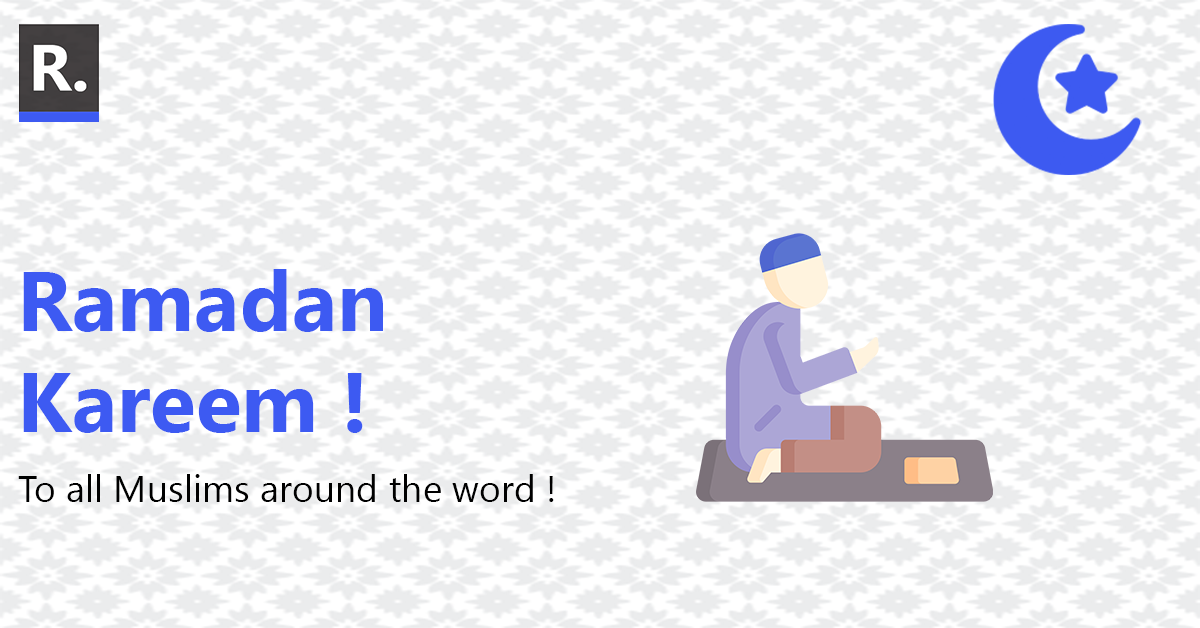
<style>
.page{position:relative;width:1200px;height:628px;background:#ffffff}
.page>*{position:absolute;margin:0}
.t1{font:84.1px "SegoeUI-Bold";color:#3d5af2}
.t2{font:37.4px "SegoeUI";color:#000000}
</style>
<div class="page">
<p class="t1" style="left:23px;top:269px;width:360px;height:164px">Ramadan<br>Kareem !</p>
<p class="t2" style="left:18px;top:474px;width:536px;height:28px">To all Muslims around the word !</p>
</div>
